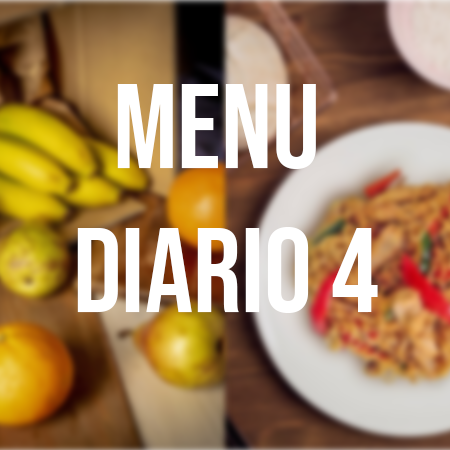
<style>
.page{position:relative;width:450px;height:450px}
.page>*{position:absolute;margin:0}
.t1{font:120px "BebasNeue-Regular";color:#ffffff}
</style>
<div class="page">
<p class="t1" style="left:77px;top:84px;width:301px;height:229px;text-align:center">MENU <br>DIARIO 4</p>
</div>
